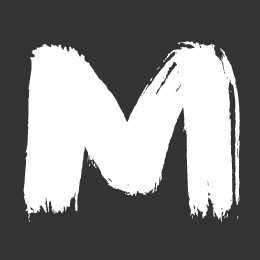
<style>
.page{position:relative;width:260px;height:260px;background:#333333}
.page>*{position:absolute;margin:0}
.t1{font:213.5px "DKCinnabarBrush";letter-spacing:0.1em;color:#ffffff;scale:1.28 1}
</style>
<div class="page">
<p class="t1" style="left:23px;top:41px;width:217px;height:181px">m</p>
</div>
